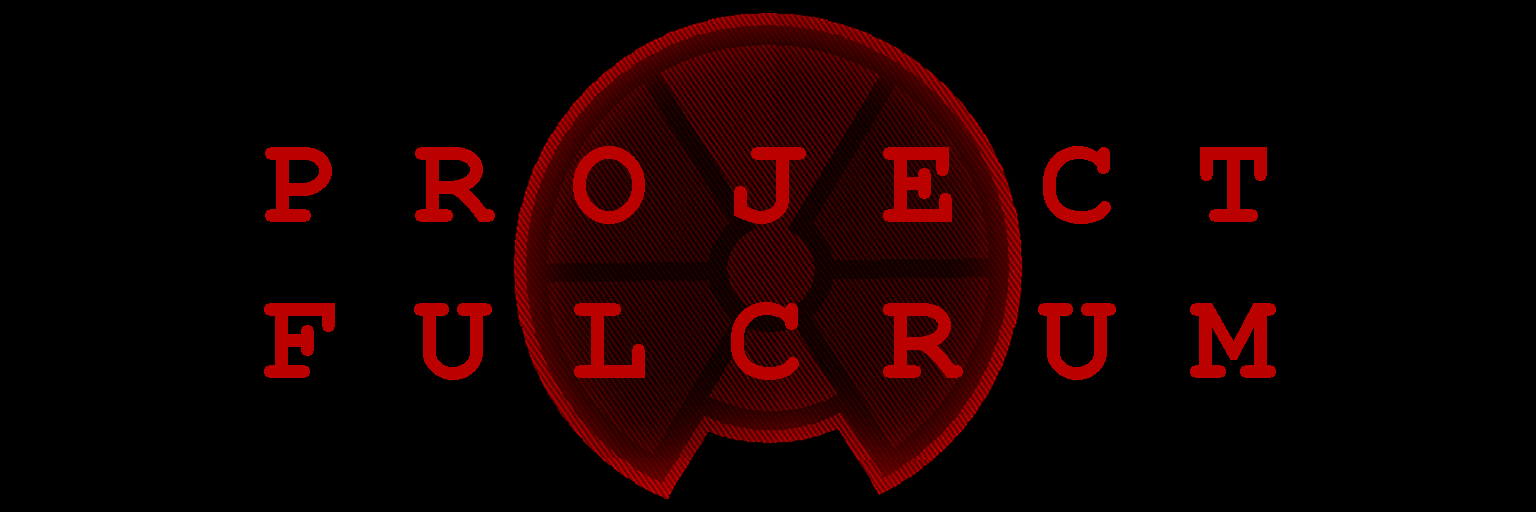
<style>
.page{position:relative;width:1536px;height:512px;background:#000000}
.page>*{position:absolute;margin:0}
.t1{font:130px "CourierNewPS-BoldMT";color:#bc0000}
</style>
<div class="page">
<p class="t1" style="left:264px;top:146px;width:1012px;height:234px;text-align:center">P R O J E C T<br>F U L C R U M</p>
</div>
